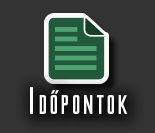
<style>
.page{position:relative;width:155px;height:133px;background:#333333}
.page>*{position:absolute;margin:0}
.t1{font:40px "Sturkopf";letter-spacing:0.12em;color:#fcfcfc;font-variant:small-caps}
</style>
<div class="page">
<p class="t1" style="left:30px;top:87px;width:98px;height:27px">Időpontok</p>
</div>
